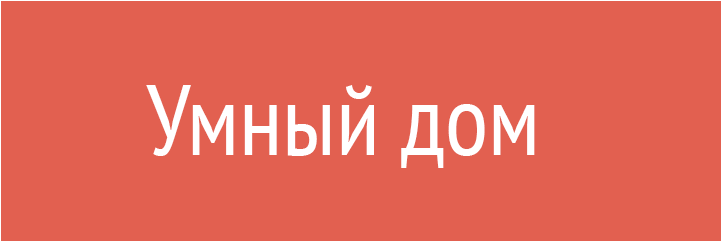
<style>
.page{position:relative;width:722px;height:242px;background:#e26050}
.page>*{position:absolute;margin:0}
.t1{font:100px "PTSans-Narrow";color:#ffffff}
</style>
<div class="page">
<p class="t1" style="left:146px;top:85px;width:389px;height:83px">Умный дом</p>
</div>
